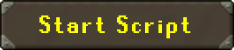
<style>
.page{position:relative;width:234px;height:50px;background:#494034}
.page>*{position:absolute;margin:0}
.t1{font:27.9px "RuneScape-UF";letter-spacing:0.1em;color:#ffff00}
</style>
<div class="page">
<p class="t1" style="left:39px;top:15px;width:152px;height:24px">Start Script</p>
</div>
